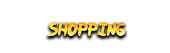
<style>
.page{position:relative;width:170px;height:53px;background:#ffffff}
.page>*{position:absolute;margin:0}
.t1{font:15px "Ninja-Naruto"}
</style>
<div class="page">
<p class="t1" style="left:47px;top:21px;width:78px;height:15px">SHOPPING</p>
</div>
